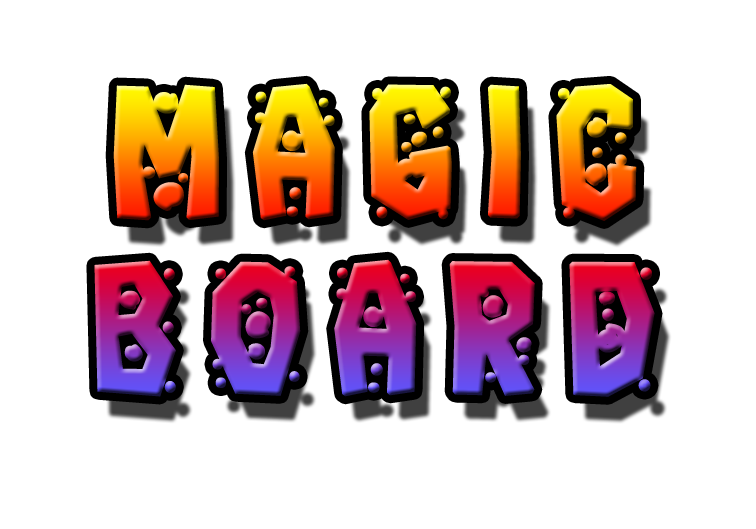
<style>
.page{position:relative;width:756px;height:529px;background:#ffffff}
.page>*{position:absolute;margin:0}
.t1{font:192px/176px "Ignorant-Regular";letter-spacing:0.15em;font-weight:bold}
</style>
<div class="page">
<p class="t1" style="left:94px;top:83px;width:561px;height:314px;text-align:center">Magic<br>Board</p>
</div>
